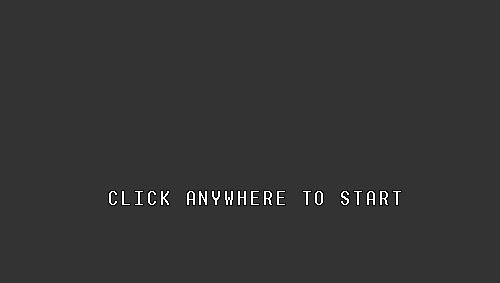
<style>
.page{position:relative;width:500px;height:283px;background:#333333}
.page>*{position:absolute;margin:0}
.t1{font:18px "Terminal";letter-spacing:0.16em;color:#ffffff}
</style>
<div class="page">
<p class="t1" style="left:109px;top:191px;width:292px;height:14px">CLICK ANYWHERE TO START</p>
</div>
